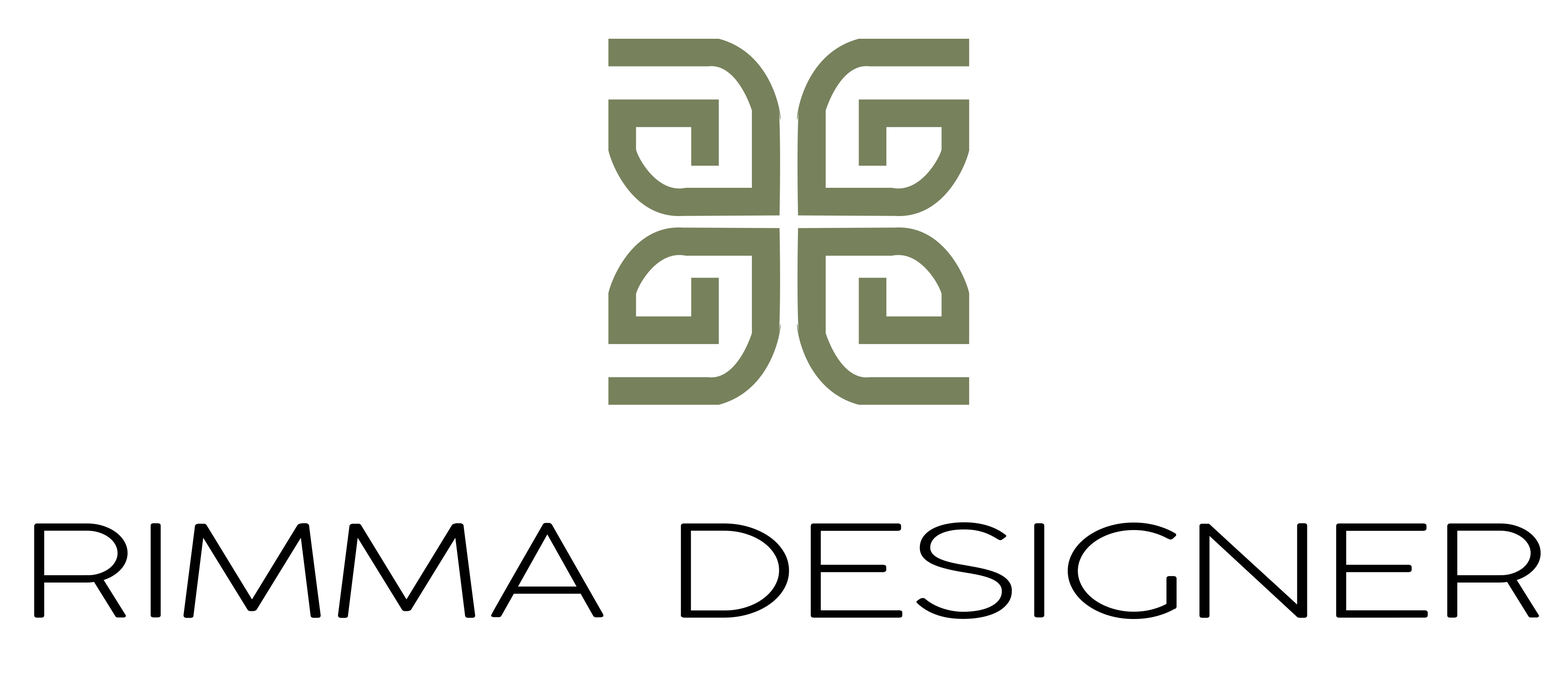
<style>
.page{position:relative;width:1568px;height:691px;background:#ffffff}
.page>*{position:absolute;margin:0}
.t1{font:126.6px "CocoGothic-Light";letter-spacing:0.005em;color:#000000;scale:1.37 1}
</style>
<div class="page">
<p class="t1" style="left:34px;top:522px;width:1507px;height:97px">RIMMA DESIGNER</p>
</div>
